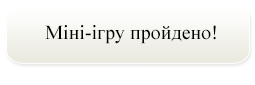
<style>
.page{position:relative;width:255px;height:85px;background:#ffffff}
.page>*{position:absolute;margin:0}
.t1{font:20px "TimesNewRomanPSMT";color:#000000}
</style>
<div class="page">
<p class="t1" style="left:45px;top:25px;width:171px;height:19px">Міні-ігру пройдено!</p>
</div>
